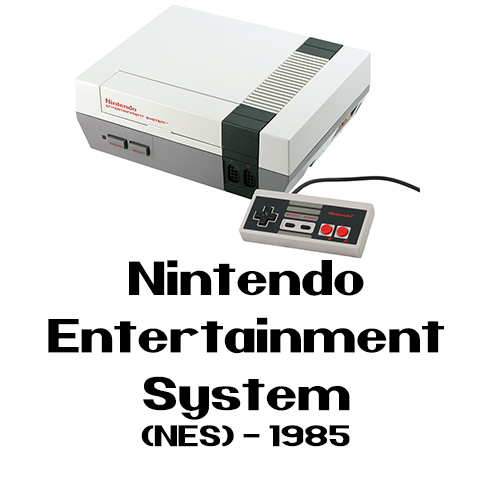
<style>
.page{position:relative;width:480px;height:480px;background:#ffffff}
.page>*{position:absolute;margin:0}
.t1{font:48px "Nintender";color:#000000}
.t2{font:30px "Nintender";color:#000000}
</style>
<div class="page">
<p class="t1" style="left:48px;top:260px;width:396px;height:187px;text-align:center">Nintendo<br>Entertainment<br>System<br><span class="t2">(NES) - 1985</span></p>
</div>
